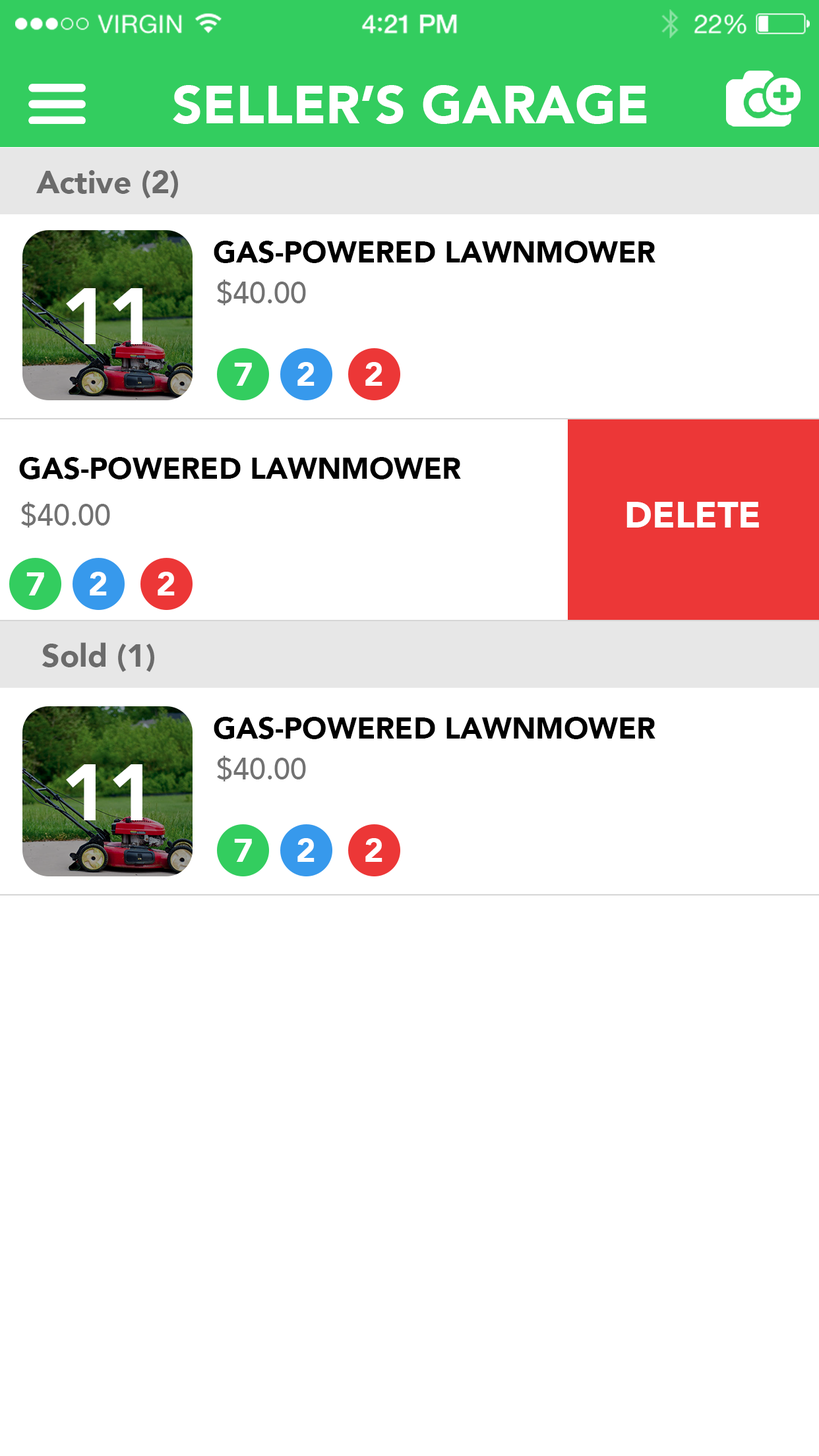
<style>
.page{position:relative;width:819px;height:1456px;background:#ffffff}
.page>*{position:absolute;margin:0}
.t1{font:52.8px "Avenir-Black";color:#ffffff}
.t2{font:29.7px "Avenir-Black";color:#000000}
.t3{font:29.7px "Avenir-Medium";color:#727272}
.t4{font:79.1px "Avenir-Black";color:#ffffff}
.t5{font:33.3px "Avenir-Black";color:#ffffff}
.t6{font:36.3px "Avenir-Black";color:#ffffff}
</style>
<div class="page">
<p class="t1" style="left:173px;top:85px;width:474px;height:39px">SELLER’S GARAGE</p>
<p class="t2" style="left:214px;top:241px;width:441px;height:22px">GAS-POWERED LAWNMOWER</p>
<p class="t3" style="left:217px;top:280px;width:89px;height:25px">$40.00</p>
<p class="t4" style="left:66px;top:288px;width:76px;height:56px">11</p>
<p class="t5" style="left:234px;top:363px;width:18px;height:23px">7</p>
<p class="t5" style="left:297px;top:362px;width:18px;height:24px">2</p>
<p class="t5" style="left:365px;top:362px;width:17px;height:24px">2</p>
<p class="t2" style="left:19px;top:457px;width:442px;height:22px">GAS-POWERED LAWNMOWER</p>
<p class="t3" style="left:21px;top:502px;width:89px;height:26px">$40.00</p>
<p class="t6" style="left:626px;top:502px;width:133px;height:26px">DELETE</p>
<p class="t5" style="left:26px;top:572px;width:18px;height:23px">7</p>
<p class="t5" style="left:90px;top:572px;width:17px;height:23px">2</p>
<p class="t5" style="left:158px;top:572px;width:17px;height:23px">2</p>
<p class="t2" style="left:214px;top:717px;width:441px;height:22px">GAS-POWERED LAWNMOWER</p>
<p class="t3" style="left:217px;top:756px;width:89px;height:25px">$40.00</p>
<p class="t4" style="left:66px;top:764px;width:76px;height:56px">11</p>
<p class="t5" style="left:234px;top:839px;width:18px;height:23px">7</p>
<p class="t5" style="left:297px;top:838px;width:18px;height:24px">2</p>
<p class="t5" style="left:365px;top:838px;width:17px;height:24px">2</p>
</div>
